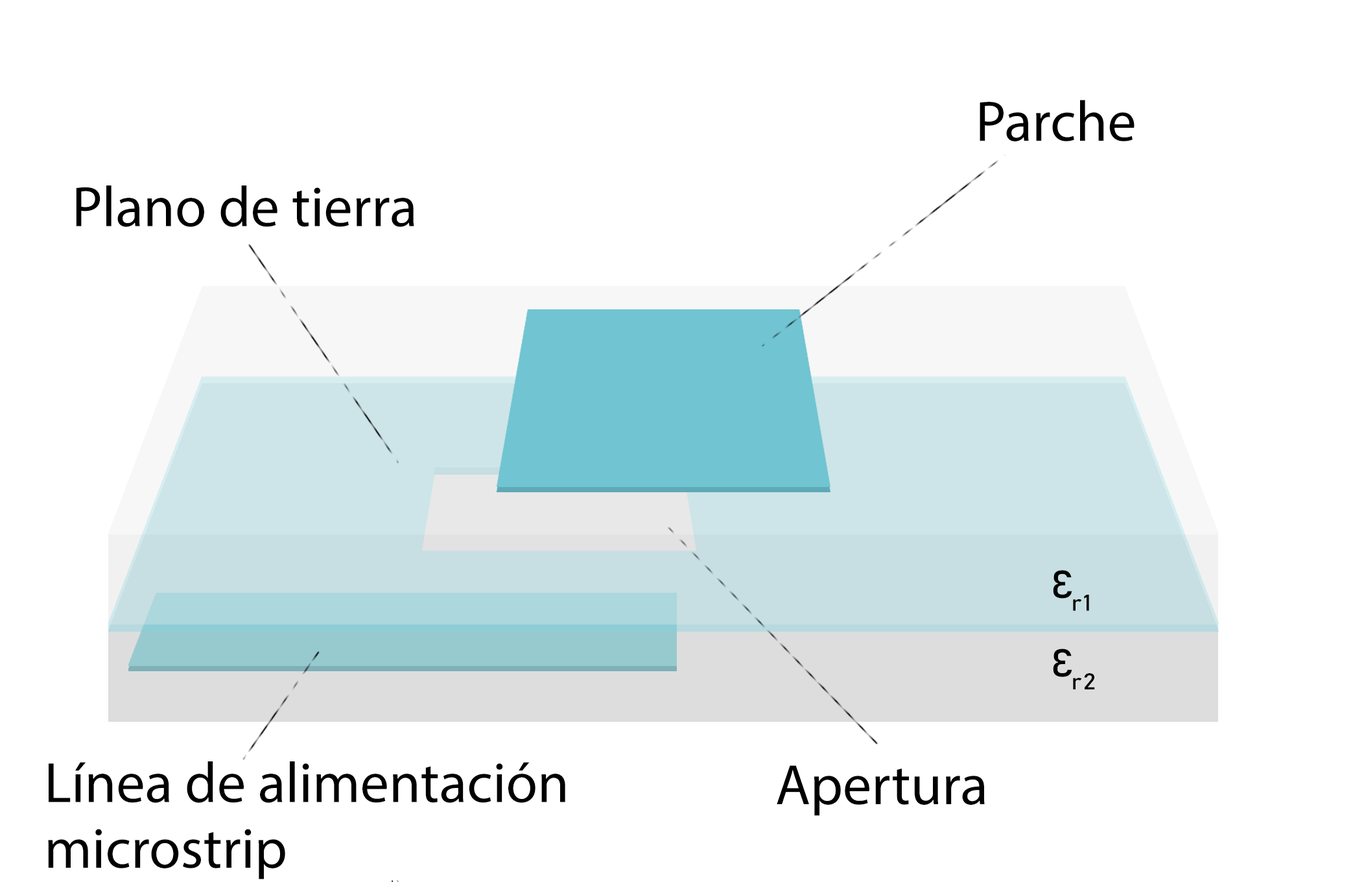
<style>
.page{position:relative;width:1353px;height:882px;background:#ffffff}
.page>*{position:absolute;margin:0}
.t1{font:98.1px "MyriadPro-Regular";color:#000000}
.t2{font:38.6px "Bahnschrift";letter-spacing:-0.06em;color:#000000;font-weight:bold;font-style:italic;scale:1.1 1}
.t3{font:98.2px/65.6px "MyriadPro-Regular";color:#000000}
.t4{font:98.2px "MyriadPro-Regular";color:#000000}
</style>
<div class="page">
<p class="t1" style="left:979px;top:100px;width:155px;height:41px">Parche</p>
<p class="t1" style="left:76px;top:185px;width:338px;height:42px">Plano de tierra</p>
<p class="t2" style="left:1053px;top:570px;width:36px;height:41px">Ɛr 1</p>
<p class="t2" style="left:1053px;top:648px;width:42px;height:41px">Ɛr 2</p>
<p class="t3" style="left:48px;top:761px;width:517px;height:118px">Línea de alimentación<br>microstrip</p>
<p class="t4" style="left:777px;top:765px;width:208px;height:50px">Apertura</p>
</div>
